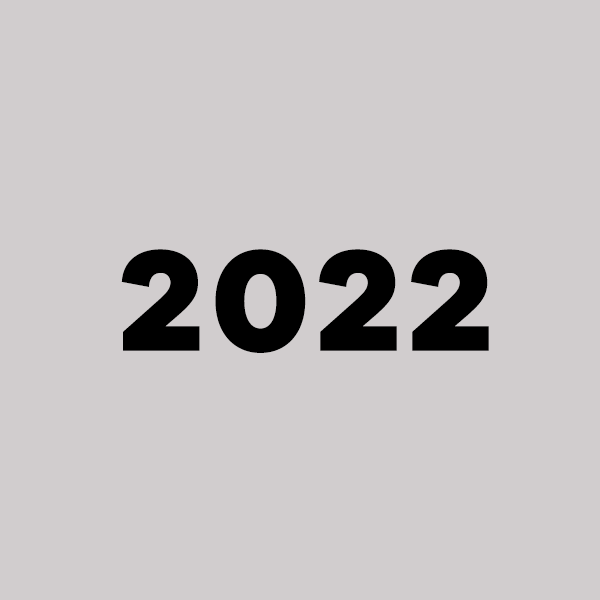
<style>
.page{position:relative;width:600px;height:600px;background:#d1cdce}
.page>*{position:absolute;margin:0}
.t1{font:147.7px "GalanoGrotesque-ExtraBold";letter-spacing:0.05em;color:#000000;text-transform:uppercase}
</style>
<div class="page">
<p class="t1" style="left:121px;top:249px;width:368px;height:104px">2022</p>
</div>
